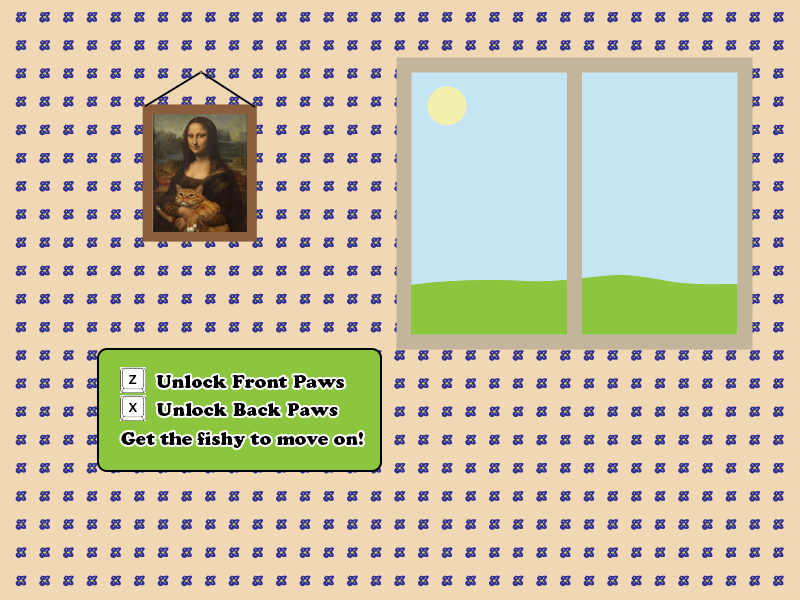
<style>
.page{position:relative;width:800px;height:600px;background:#f1d8b4}
.page>*{position:absolute;margin:0}
.t1{font:18px "CooperBlackStd";color:#000000}
</style>
<div class="page">
<p class="t1" style="left:156px;top:375px;width:189px;height:13px">Unlock Front Paws</p>
<p class="t1" style="left:156px;top:403px;width:182px;height:13px">Unlock Back Paws</p>
<p class="t1" style="left:121px;top:432px;width:242px;height:16px">Get the fishy to move on!</p>
</div>
